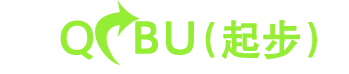
<style>
.page{position:relative;width:349px;height:74px;background:#ffffff}
.page>*{position:absolute;margin:0}
.t1{font:46.7px "SIL-Hei-Med-Jian";color:#96ed35;font-weight:bold}
.t2{font:40px "SIL-Hei-Med-Jian";color:#96ed35;font-weight:bold}
</style>
<div class="page">
<p class="t1" style="left:60px;top:20px;width:257px;height:40px">Q  BU<span class="t2">(起步)</span></p>
</div>
